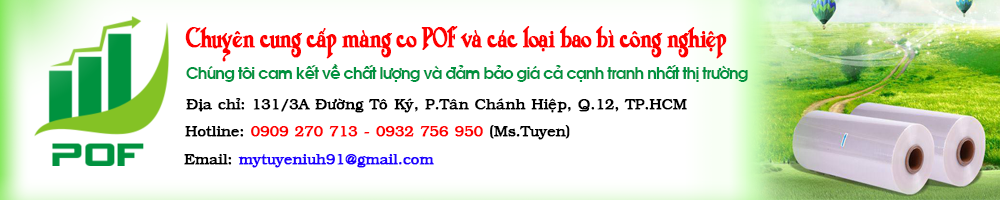
<style>
.page{position:relative;width:1000px;height:200px;background:#ffffff}
.page>*{position:absolute;margin:0}
.t1{font:26px "VNI-Duff";letter-spacing:-0.04em;color:#fe0000;font-weight:bold;scale:0.8 1}
.t2{font:16px "VNI-Avo-Bold";letter-spacing:-0.05em;color:#00923f}
.t3{font:15px "VNI-Book";letter-spacing:-0.025em;color:#000000;font-weight:bold}
.t4{font:15px "VNI-Book";letter-spacing:-0.025em;color:#fe0000;font-weight:bold}
.t5{font:15px "VNI-Book";letter-spacing:-0.025em;color:#1e00ff;font-weight:bold}
</style>
<div class="page">
<p class="t1" style="left:185px;top:26px;width:542px;height:36px">Chuyeân cung caáp maøng co POF vaø caùc loaïi bao bì coâng nghieäp</p>
<p class="t2" style="left:186px;top:64px;width:562px;height:18px">Chuùng toâi cam keát veà chaát löôïng vaø ñaûm baûo giaù caû caïnh tranh nhaát thò tröôøng</p>
<p class="t3" style="left:186px;top:98px;width:501px;height:15px">Ñòa chæ: 131/3A Ñöôøng Toâ Kyù, P.Taân Chaùnh Hieäp, Q.12, TP.HCM</p>
<p class="t4" style="left:185px;top:125px;width:385px;height:15px"><span class="t3">Hotline: </span>0909 270 713 - 0932 756 950<span class="t3"> (Ms.Tuyen)</span></p>
<p class="t5" style="left:184px;top:154px;width:250px;height:14px"><span class="t3">Email:</span> mytuyeniuh91@gmail.com</p>
</div>
